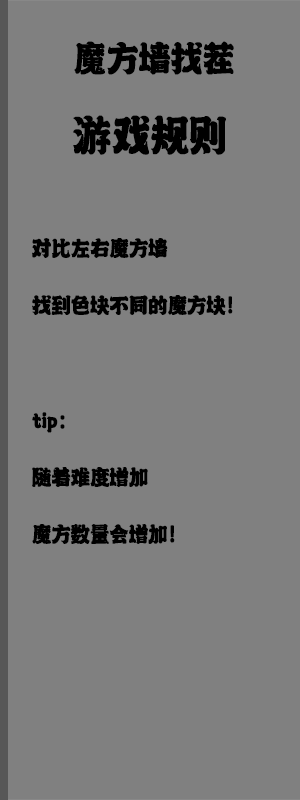
<style>
.page{position:relative;width:300px;height:800px;background:#808080}
.page>*{position:absolute;margin:0}
.t1{font:41.7px "-";letter-spacing:-0.02em;color:#000000;font-weight:bold;scale:0.88 1}
.t2{font:50px "-";letter-spacing:-0.02em;color:#000000;font-weight:bold;scale:0.88 1}
.t3{font:25px/57.1px "-";letter-spacing:-0.02em;color:#000000;font-weight:bold;scale:0.88 1}
</style>
<div class="page">
<p class="t1" style="left:74px;top:41px;width:160px;height:34px">魔方墙找茬</p>
<p class="t2" style="left:73px;top:115px;width:153px;height:40px">游戏规则</p>
<p class="t3" style="left:32px;top:238px;width:201px;height:306px">对比左右魔方墙<br>找到色块不同的魔方块！<br><br>tip：<br>随着难度增加<br>魔方数量会增加！</p>
</div>
